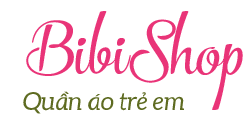
<style>
.page{position:relative;width:250px;height:120px;background:#ffffff}
.page>*{position:absolute;margin:0}
.t1{font:83.3px "SVN-TheCarpenter";color:#e93478;scale:1.09 1}
.t2{font:25px "SVN-AleoItalic";color:#5e6b21}
</style>
<div class="page">
<p class="t1" style="left:26px;top:11px;width:217px;height:99px">BibiShop</p>
<p class="t2" style="left:23px;top:91px;width:161px;height:23px">Quần áo trẻ em</p>
</div>
